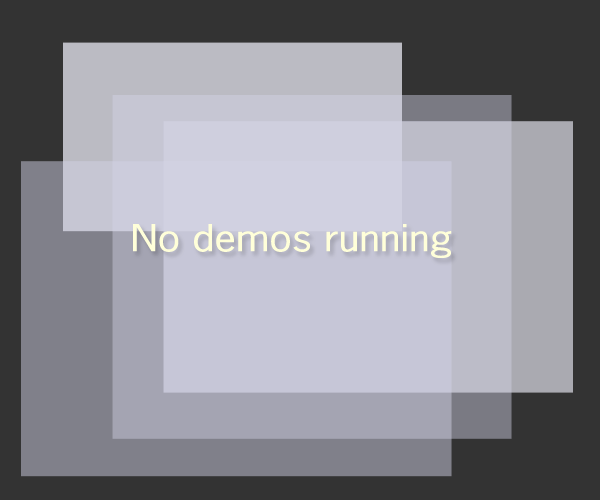
<style>
.page{position:relative;width:600px;height:500px;background:#333333}
.page>*{position:absolute;margin:0}
.t1{font:35px "NewsGothicStd";color:#ffffd9;scale:1.2 1}
</style>
<div class="page">
<p class="t1" style="left:133px;top:224px;width:319px;height:34px">No demos running</p>
</div>
